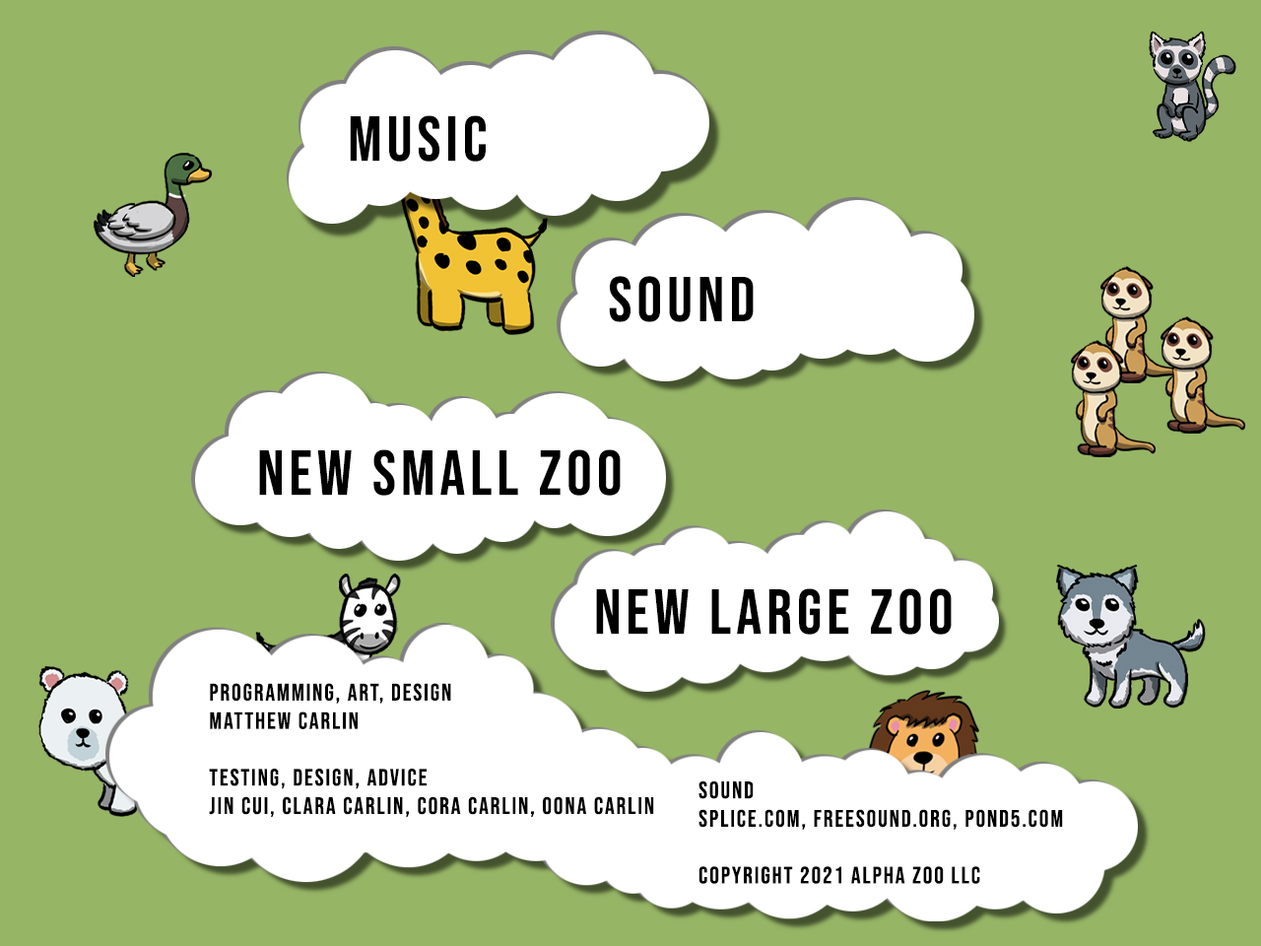
<style>
.page{position:relative;width:1261px;height:946px;background:#96b565}
.page>*{position:absolute;margin:0}
.t1{font:63px "BebasNeue-Regular";letter-spacing:0.08em;color:#000000}
.t2{font:23.6px "BebasNeue-Regular";letter-spacing:0.08em;color:#000000}
</style>
<div class="page">
<p class="t1" style="left:350px;top:115px;width:136px;height:47px">MUSIC</p>
<p class="t1" style="left:609px;top:276px;width:145px;height:46px">SOUND</p>
<p class="t1" style="left:259px;top:449px;width:362px;height:47px">NEW SMALL ZOO</p>
<p class="t1" style="left:596px;top:588px;width:356px;height:46px">NEW LARGE ZOO</p>
<p class="t2" style="left:209px;top:683px;width:445px;height:134px">programming, ART, DESIGN<br>Matthew Carlin<br><br>TESTING, DESIGN, ADVICE<br>JIN CUI, clARA CARLIN, CORA CARLIN, OONA CARLIN</p>
<p class="t2" style="left:698px;top:780px;width:365px;height:104px">SOUND<br>SPLICE.COM, FREESOUND.ORG, POND5.COM<br><br>Copyright 2021 AlPHA ZOO LLC</p>
</div>
